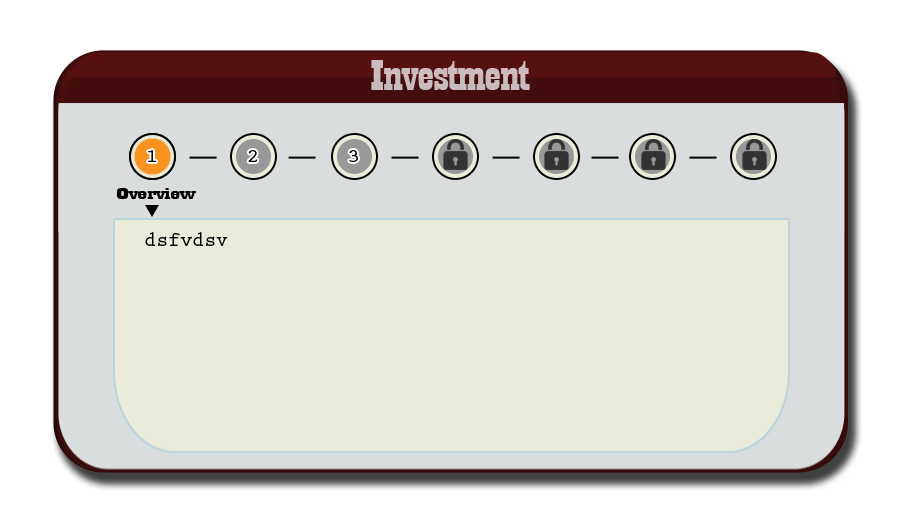
<style>
.page{position:relative;width:910px;height:512px;background:#eaebd8}
.page>*{position:absolute;margin:0}
.t1{font:44.6px "Playbill";letter-spacing:-0.025em;color:#c8bbbe;scale:1.61 1}
.t2{font:18.8px "PrestigeEliteStd-Bd";letter-spacing:-0.025em;color:#020201;scale:1.18 1}
.t3{font:17.3px "Playbill";letter-spacing:-0.025em;color:#020201;scale:2.47 1}
.t4{font:20.8px "PrestigeEliteStd-Bd";letter-spacing:-0.025em;color:#020201}
</style>
<div class="page">
<p class="t1" style="left:371px;top:60px;width:159px;height:30px">Investment</p>
<p class="t2" style="left:148px;top:150px;width:8px;height:12px">1</p>
<p class="t2" style="left:248px;top:150px;width:10px;height:12px">2</p>
<p class="t2" style="left:349px;top:150px;width:9px;height:12px">3</p>
<p class="t3" style="left:117px;top:188px;width:79px;height:11px">Overview</p>
<p class="t4" style="left:145px;top:232px;width:83px;height:14px">dsfvdsv</p>
</div>
